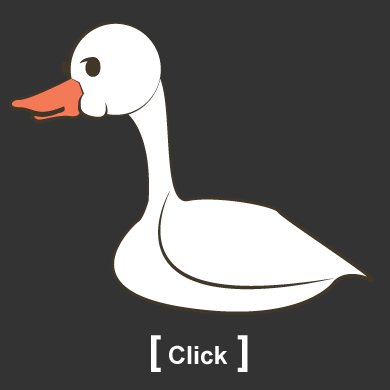
<style>
.page{position:relative;width:390px;height:390px;background:#333333}
.page>*{position:absolute;margin:0}
.t1{font:40px "Arial-BoldMT";color:#ffffff}
.t2{font:25px "Arial-BoldMT";color:#ffffff}
</style>
<div class="page">
<p class="t1" style="left:151px;top:335px;width:10px;height:37px">[</p>
<p class="t1" style="left:237px;top:335px;width:11px;height:37px;rotate:180deg">[</p>
<p class="t2" style="left:169px;top:345px;width:59px;height:20px">Click</p>
</div>
